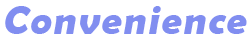
<style>
.page{position:relative;width:250px;height:40px;background:#ffffff}
.page>*{position:absolute;margin:0}
.t1{font:40px "BerlinSansFBDemi-Bold";letter-spacing:0.05em;color:#818ef0;font-style:italic}
</style>
<div class="page">
<p class="t1" style="left:5px;top:6px;width:242px;height:28px">Convenience</p>
</div>
